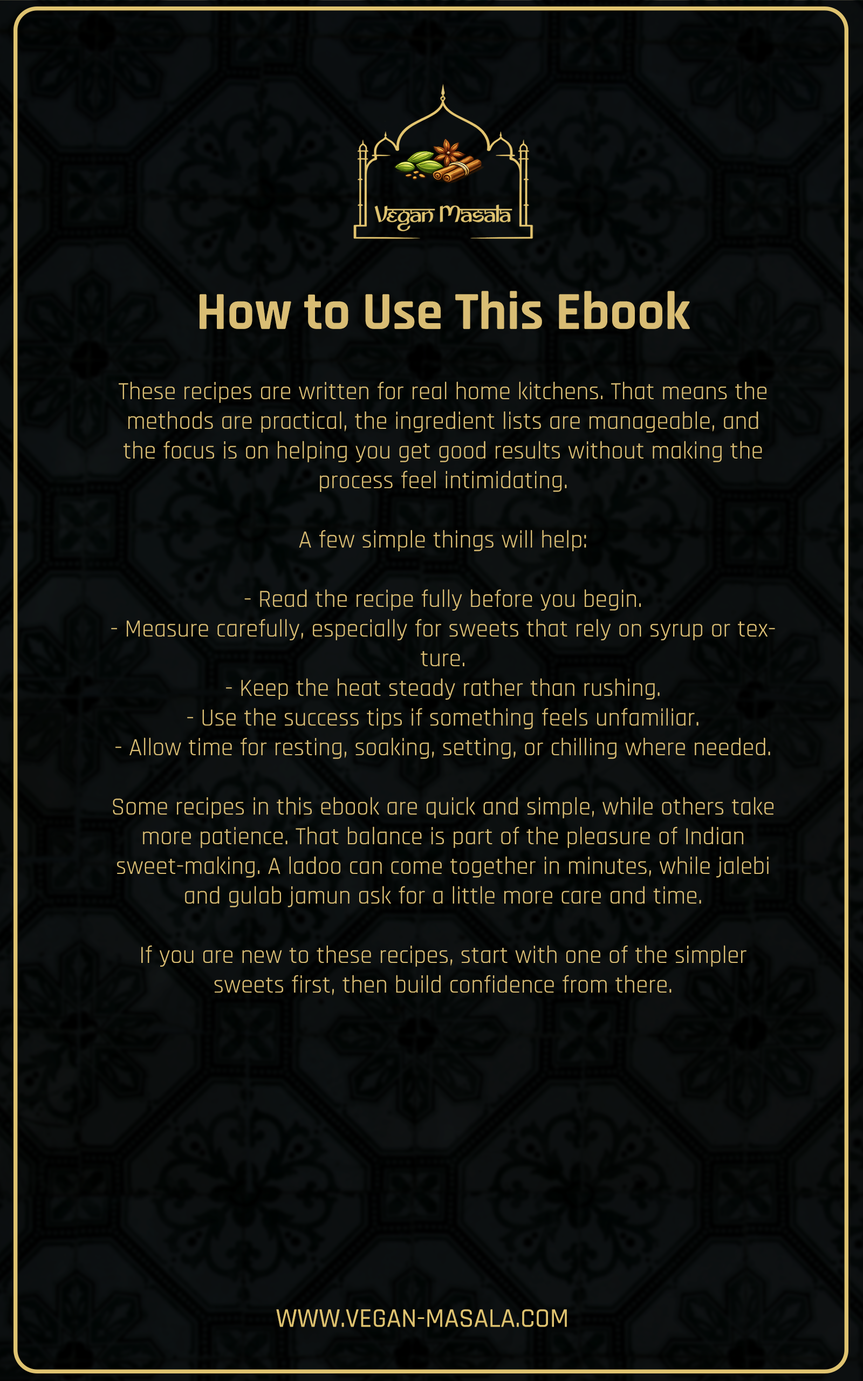
<style>
.page{position:relative;width:863px;height:1381px}
.page>*{position:absolute;margin:0}
.t1{font:54px "Rajdhani-Bold";color:#d9bd74}
.t2{font:24.7px "Rajdhani-Regular";color:#d9bd74}
.t3{font:27px "Rajdhani-Medium";color:#dfc370}
</style>
<div class="page">
<p class="t1" style="left:200px;top:291px;width:490px;height:38px">How to Use This Ebook</p>
<p class="t2" style="left:111px;top:381px;width:664px;height:614px;text-align:center">These recipes are written for real home kitchens. That means the methods are practical, the ingredient lists are manageable, and the focus is on helping you get good results without making the process feel intimidating.<br><br>A few simple things will help:<br><br>- Read the recipe fully before you begin.<br>- Measure carefully, especially for sweets that rely on syrup or texture.<br>- Keep the heat steady rather than rushing.<br>- Use the success tips if something feels unfamiliar.<br>- Allow time for resting, soaking, setting, or chilling where needed.<br><br>Some recipes in this ebook are quick and simple, while others take more patience. That balance is part of the pleasure of Indian sweet-making. A ladoo can come together in minutes, while jalebi and gulab jamun ask for a little more care and time.<br><br>If you are new to these recipes, start with one of the simpler sweets first, then build confidence from there.</p>
<p class="t3" style="left:276px;top:1310px;width:291px;height:17px">WWW.VEGAN-MASALA.COM</p>
</div>
